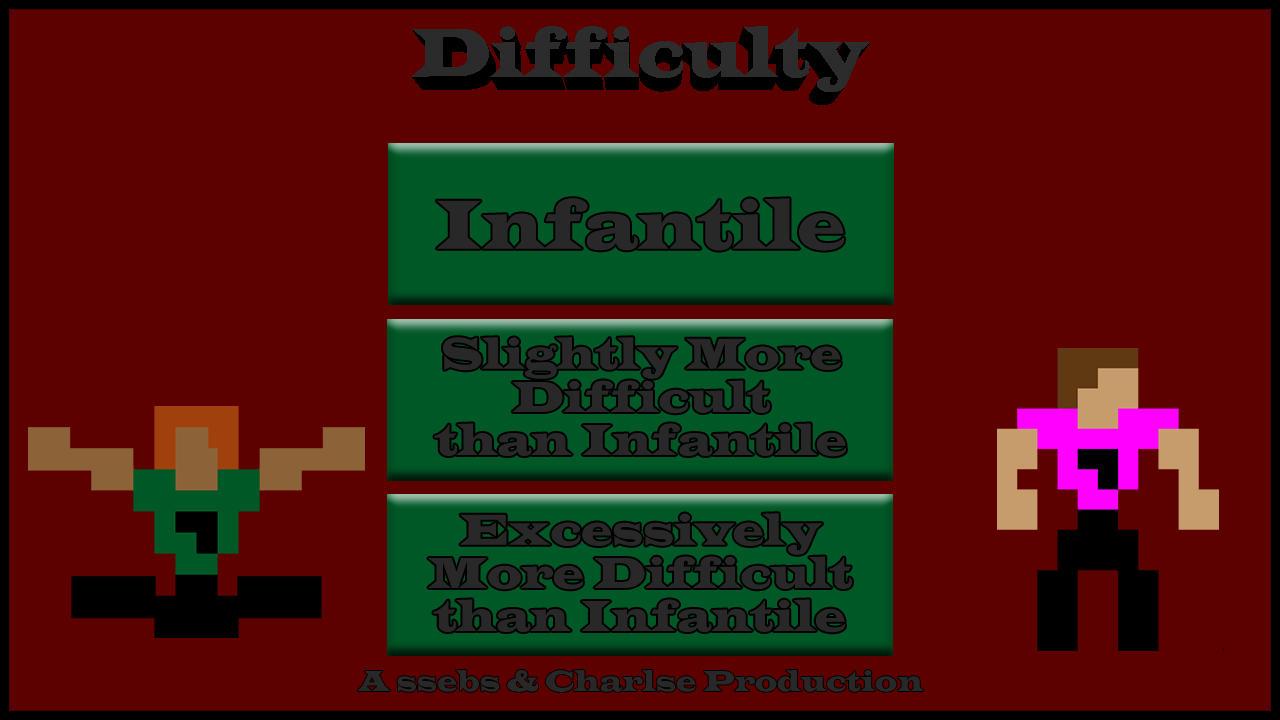
<style>
.page{position:relative;width:1280px;height:720px;background:#5d0000}
.page>*{position:absolute;margin:0}
.t1{font:72px "LatinWide";color:#282828;scale:0.75 1}
.t2{font:45px "LatinWide";color:#282828;scale:0.78 1}
</style>
<div class="page">
<p class="t1" style="left:436px;top:198px;width:408px;height:53px">Infantile</p>
<p class="t2" style="left:434px;top:337px;width:412px;height:120px;text-align:center">Slightly More<br>Difficult<br>than Infantile</p>
<p class="t2" style="left:428px;top:513px;width:424px;height:120px;text-align:center">Excessively<br>More Difficult<br>than Infantile</p>
</div>
